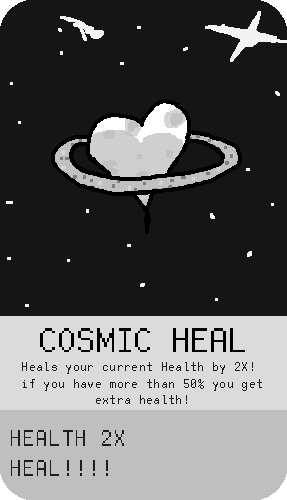
<style>
.page{position:relative;width:287px;height:500px;background:#151515}
.page>*{position:absolute;margin:0}
.t1{font:37.5px "FreePixel-Regular";color:#000000}
.t2{font:14.1px "FreePixel-Regular";color:#1e1e1e}
.t3{font:25px "FreePixel-Regular";color:#1e1e1e}
</style>
<div class="page">
<p class="t1" style="left:40px;top:328px;width:205px;height:24px">COSMIC HEAL</p>
<p class="t2" style="left:22px;top:362px;width:240px;height:42px;text-align:center">Heals your current Health by 2X! <br>if you have more than 50% you get<br>extra health!</p>
<p class="t3" style="left:11px;top:430px;width:113px;height:46px">HEALTH 2X<br>HEAL!!!!</p>
</div>
